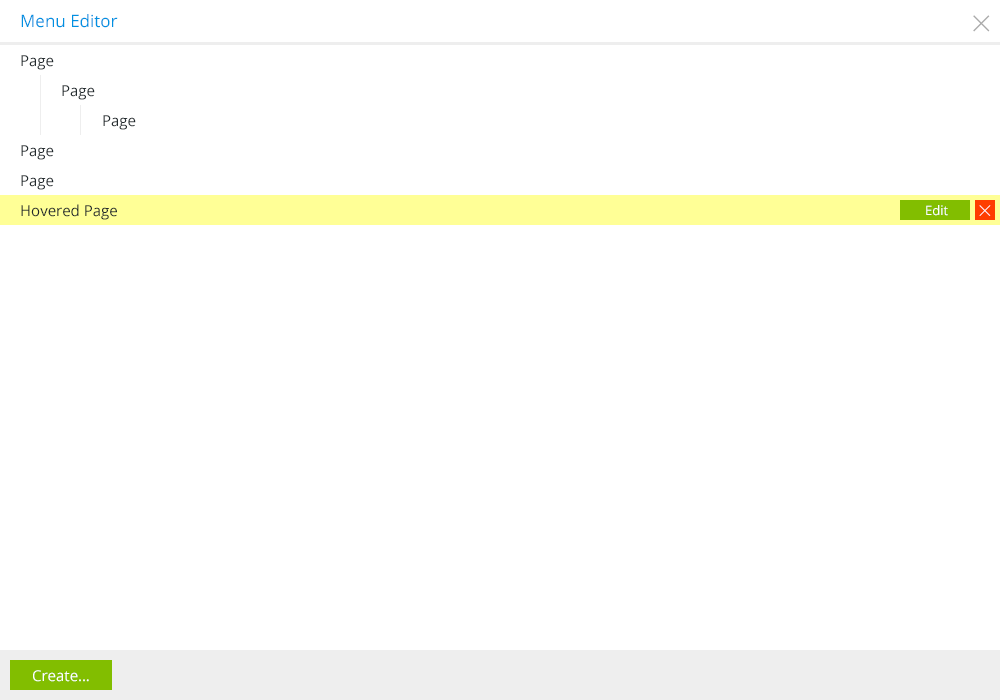
<style>
.page{position:relative;width:1000px;height:700px;background:#ffffff}
.page>*{position:absolute;margin:0}
.t1{font:17px "OpenSans";color:#0091e1}
.t2{font:36px "OpenSans-Light";color:#aaaaaa}
.t3{font:15px "OpenSans";color:#21292d}
.t4{font:13px "OpenSans";color:#ffffff}
.t5{font:24px "OpenSans-Light";color:#ffffff}
.t6{font:15px "OpenSans";color:#ffffff}
</style>
<div class="page">
<p class="t1" style="left:21px;top:14px;width:97px;height:14px">Menu Editor</p>
<p class="t2" style="left:973px;top:15px;width:17px;height:17px">×</p>
<p class="t3" style="left:21px;top:55px;width:33px;height:15px">Page</p>
<p class="t3" style="left:62px;top:85px;width:33px;height:15px">Page</p>
<p class="t3" style="left:103px;top:115px;width:33px;height:15px">Page</p>
<p class="t3" style="left:21px;top:145px;width:33px;height:15px">Page</p>
<p class="t3" style="left:21px;top:175px;width:33px;height:15px">Page</p>
<p class="t3" style="left:21px;top:204px;width:96px;height:16px">Hovered Page</p>
<p class="t4" style="left:926px;top:205px;width:22px;height:11px">Edit</p>
<p class="t5" style="left:979px;top:205px;width:12px;height:11px">×</p>
<p class="t6" style="left:33px;top:670px;width:56px;height:12px">Create…</p>
</div>
